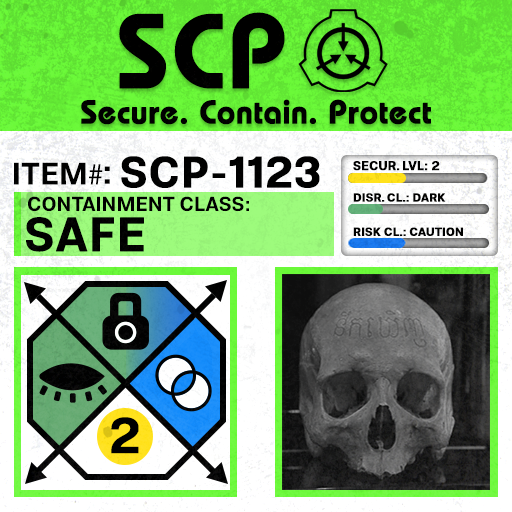
<style>
.page{position:relative;width:512px;height:512px}
.page>*{position:absolute;margin:0}
.t1{font:105.8px "BauhausLT-Demi";color:#000000;font-weight:bold}
.t2{font:33px "BauhausLT-Demi";color:#000000;font-weight:bold}
.t3{font:43.7px "Molde-Semibold";color:#000000;font-weight:bold}
.t4{font:12.5px "Molde-Semibold";color:#000000;font-weight:bold}
.t5{font:31.1px "Molde-Semibold";color:#000000}
.t6{font:31.1px "MyriadPro-Regular";color:#000000}
.t7{font:34.5px "Molde-Semibold";color:#000000}
.t8{font:20.3px "Molde-Semibold";color:#000000}
.t9{font:11.7px "Molde-Semibold";color:#000000;font-weight:bold}
.t10{font:47.8px "Molde-Semibold";color:#000000;font-weight:bold}
</style>
<div class="page">
<p class="t1" style="left:119px;top:12px;width:166px;height:77px">SCP</p>
<p class="t2" style="left:81px;top:99px;width:350px;height:26px">Secure. Contain. Protect</p>
<p class="t3" style="left:121px;top:156px;width:199px;height:32px">SCP-1123</p>
<p class="t4" style="left:353px;top:161px;width:87px;height:10px">SECUR. LVL: 2</p>
<p class="t5" style="left:14px;top:162px;width:89px;height:23px">ITEM<span class="t6">#</span></p>
<p class="t7" style="left:104px;top:166px;width:6px;height:18px">:</p>
<p class="t8" style="left:28px;top:196px;width:221px;height:16px">CONTAINMENT CLASS:</p>
<p class="t9" style="left:353px;top:193px;width:93px;height:9px">DISR. CL.: DARK</p>
<p class="t10" style="left:26px;top:217px;width:118px;height:35px">SAFE</p>
<p class="t9" style="left:353px;top:227px;width:110px;height:9px">RISK CL.: CAUTION</p>
</div>
